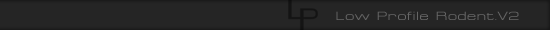
<style>
.page{position:relative;width:550px;height:30px;background:#252525}
.page>*{position:absolute;margin:0}
.t1{font:12px "Federation";letter-spacing:0.05em;color:#666666}
</style>
<div class="page">
<p class="t1" style="left:336px;top:11px;width:183px;height:9px">Low Profile Rodent.V2</p>
</div>
